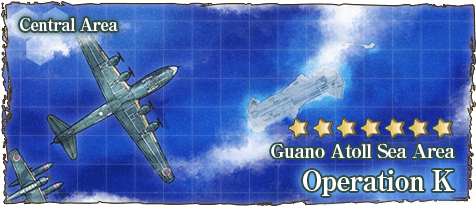
<style>
.page{position:relative;width:476px;height:206px}
.page>*{position:absolute;margin:0}
.t1{font:17px "RyuminPro-ExBold";letter-spacing:-0.04em;color:#ffffff}
.t2{font:19px "RyuminPro-ExBold";letter-spacing:-0.04em;color:#ffffff}
.t3{font:28px "RyuminPro-ExBold";letter-spacing:-0.04em;color:#ffffff}
</style>
<div class="page">
<p class="t1" style="left:20px;top:18px;width:98px;height:13px">Central Area</p>
<p class="t2" style="left:271px;top:143px;width:184px;height:15px">Guano Atoll Sea Area</p>
<p class="t3" style="left:303px;top:170px;width:151px;height:26px">Operation K</p>
</div>
